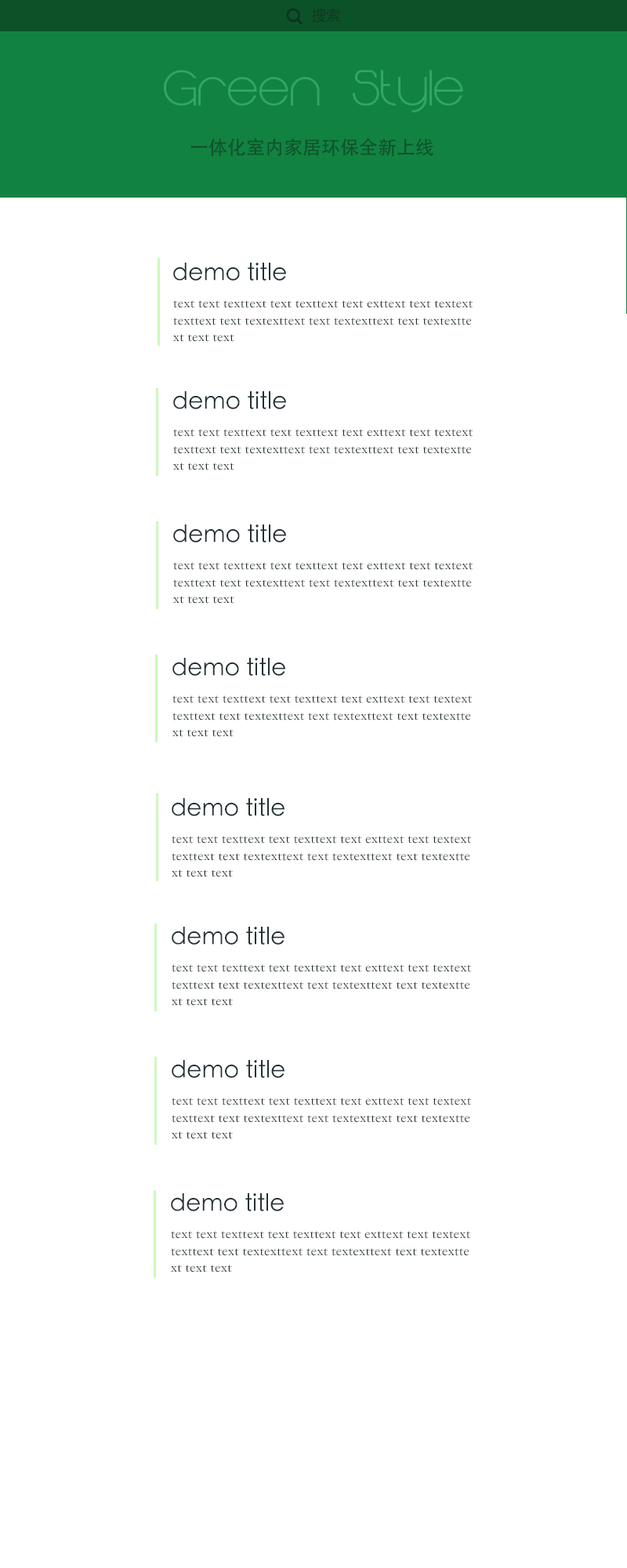
<style>
.page{position:relative;width:627px;height:1568px;background:#ffffff}
.page>*{position:absolute;margin:0}
.t1{font:18.8px "iconfont";color:#0e341e}
.t2{font:14.1px "MicrosoftYaHei";color:#0f3820}
.t3{font:47px "MajoramSans-Bold";color:#32a663}
.t4{font:18.8px "AdobeHeitiStd-Regular";color:#0e512a}
.t5{font:23.5px "STHeitiTC-Light";color:#223034}
.t6{font:14.1px "STSongti-SC-Light";color:#223034}
</style>
<div class="page">
<p class="t1" style="left:286px;top:8px;width:17px;height:17px">󰄬</p>
<p class="t2" style="left:312px;top:9px;width:28px;height:14px">搜索</p>
<p class="t3" style="left:164px;top:70px;width:299px;height:43px">Green Style</p>
<p class="t4" style="left:191px;top:138px;width:243px;height:18px">一体化室内家居环保全新上线</p>
<p class="t5" style="left:173px;top:263px;width:113px;height:18px">demo title</p>
<p class="t6" style="left:173px;top:300px;width:300px;height:42px">text text texttext text texttext text exttext text textext<br>texttext text textexttext text textexttext text textextte<br>xt text text</p>
<p class="t5" style="left:173px;top:391px;width:113px;height:18px">demo title</p>
<p class="t6" style="left:173px;top:429px;width:300px;height:41px">text text texttext text texttext text exttext text textext<br>texttext text textexttext text textexttext text textextte<br>xt text text</p>
<p class="t5" style="left:173px;top:524px;width:113px;height:19px">demo title</p>
<p class="t6" style="left:173px;top:562px;width:300px;height:42px">text text texttext text texttext text exttext text textext<br>texttext text textexttext text textexttext text textextte<br>xt text text</p>
<p class="t5" style="left:172px;top:658px;width:113px;height:18px">demo title</p>
<p class="t6" style="left:172px;top:695px;width:300px;height:42px">text text texttext text texttext text exttext text textext<br>texttext text textexttext text textexttext text textextte<br>xt text text</p>
<p class="t5" style="left:172px;top:798px;width:113px;height:18px">demo title</p>
<p class="t6" style="left:172px;top:836px;width:299px;height:41px">text text texttext text texttext text exttext text textext<br>texttext text textexttext text textexttext text textextte<br>xt text text</p>
<p class="t5" style="left:172px;top:927px;width:113px;height:18px">demo title</p>
<p class="t6" style="left:172px;top:964px;width:299px;height:42px">text text texttext text texttext text exttext text textext<br>texttext text textexttext text textexttext text textextte<br>xt text text</p>
<p class="t5" style="left:172px;top:1060px;width:113px;height:18px">demo title</p>
<p class="t6" style="left:172px;top:1098px;width:299px;height:41px">text text texttext text texttext text exttext text textext<br>texttext text textexttext text textexttext text textextte<br>xt text text</p>
<p class="t5" style="left:171px;top:1193px;width:113px;height:18px">demo title</p>
<p class="t6" style="left:171px;top:1231px;width:299px;height:41px">text text texttext text texttext text exttext text textext<br>texttext text textexttext text textexttext text textextte<br>xt text text</p>
</div>
